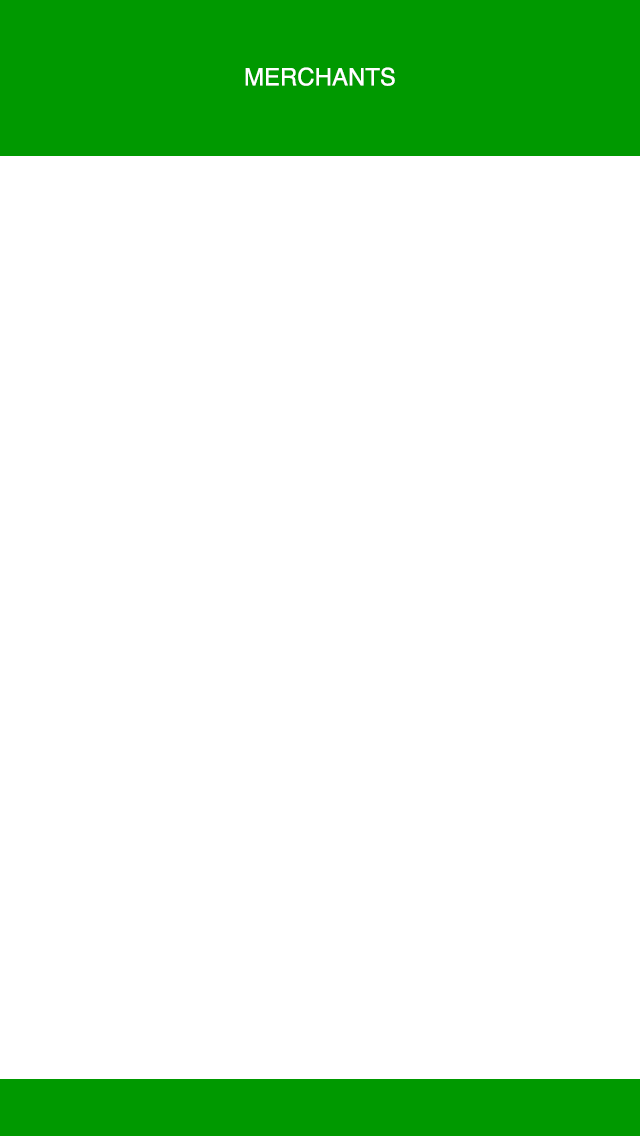
<style>
.page{position:relative;width:640px;height:1136px;background:#ffffff}
.page>*{position:absolute;margin:0}
.t1{font:24px "Helvetica";color:#ffffff}
</style>
<div class="page">
<p class="t1" style="left:245px;top:67px;width:150px;height:19px">MERCHANTS</p>
</div>
